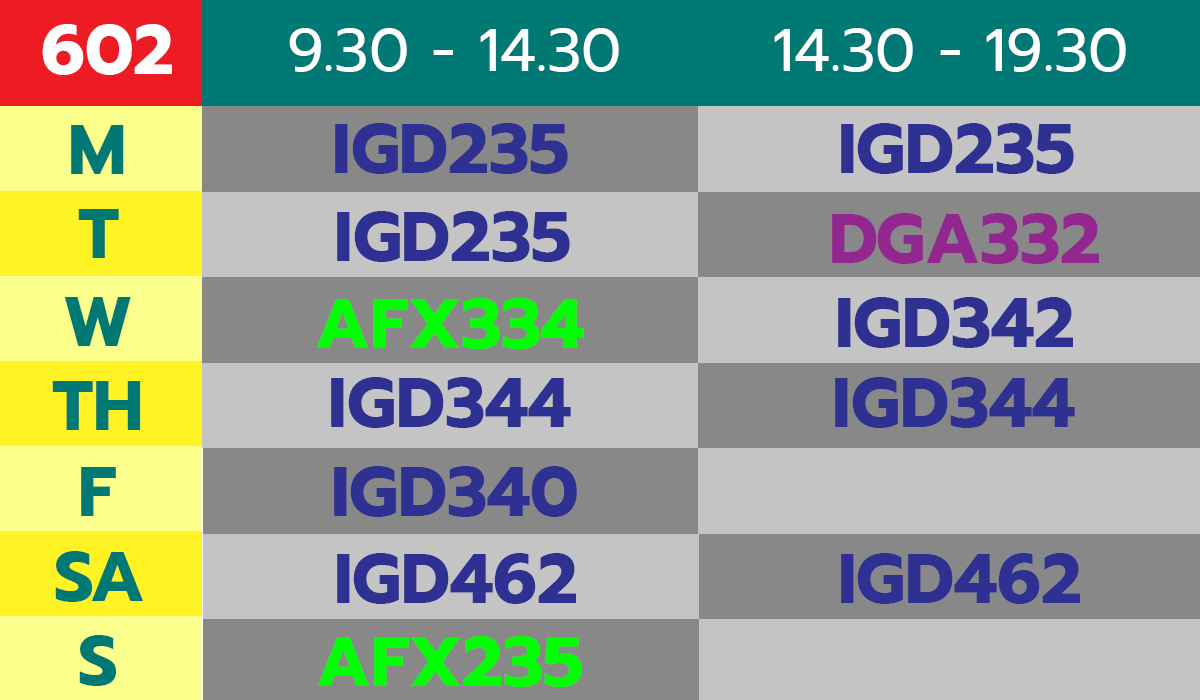
<style>
.page{position:relative;width:1200px;height:700px;background:#c4c4c4}
.page>*{position:absolute;margin:0}
.t1{font:70px "Prompt-Bold";color:#ffffff}
.t2{font:60px "Prompt-Regular";color:#ffffff}
.t3{font:70px "Prompt-Bold";color:#007873}
.t4{font:70px "Prompt-Bold";color:#2e3192}
.t5{font:70px "Prompt-Bold";color:#92278f}
.t6{font:70px "Prompt-Bold";color:#00ff00}
</style>
<div class="page">
<p class="t1" style="left:42px;top:24px;width:130px;height:51px">602</p>
<p class="t2" style="left:289px;top:28px;width:330px;height:44px">9.30 - 14.30</p>
<p class="t2" style="left:774px;top:28px;width:352px;height:44px">14.30 - 19.30</p>
<p class="t3" style="left:71px;top:125px;width:53px;height:49px">M</p>
<p class="t4" style="left:335px;top:123px;width:233px;height:51px">IGD235</p>
<p class="t4" style="left:841px;top:123px;width:233px;height:51px">IGD235</p>
<p class="t3" style="left:78px;top:209px;width:41px;height:49px">T</p>
<p class="t4" style="left:337px;top:211px;width:233px;height:51px">IGD235</p>
<p class="t5" style="left:832px;top:213px;width:267px;height:51px">DGA332</p>
<p class="t3" style="left:64px;top:297px;width:67px;height:49px">W</p>
<p class="t6" style="left:316px;top:298px;width:268px;height:51px">AFX334</p>
<p class="t4" style="left:838px;top:297px;width:235px;height:51px">IGD342</p>
<p class="t4" style="left:331px;top:377px;width:240px;height:51px">IGD344</p>
<p class="t4" style="left:835px;top:377px;width:240px;height:51px">IGD344</p>
<p class="t3" style="left:52px;top:381px;width:89px;height:49px">TH</p>
<p class="t3" style="left:81px;top:467px;width:35px;height:49px">F</p>
<p class="t4" style="left:334px;top:466px;width:243px;height:51px">IGD340</p>
<p class="t3" style="left:55px;top:551px;width:89px;height:51px">SA</p>
<p class="t4" style="left:337px;top:553px;width:239px;height:51px">IGD462</p>
<p class="t4" style="left:841px;top:553px;width:239px;height:51px">IGD462</p>
<p class="t3" style="left:79px;top:635px;width:38px;height:51px">S</p>
<p class="t6" style="left:317px;top:636px;width:265px;height:51px">AFX235</p>
</div>
